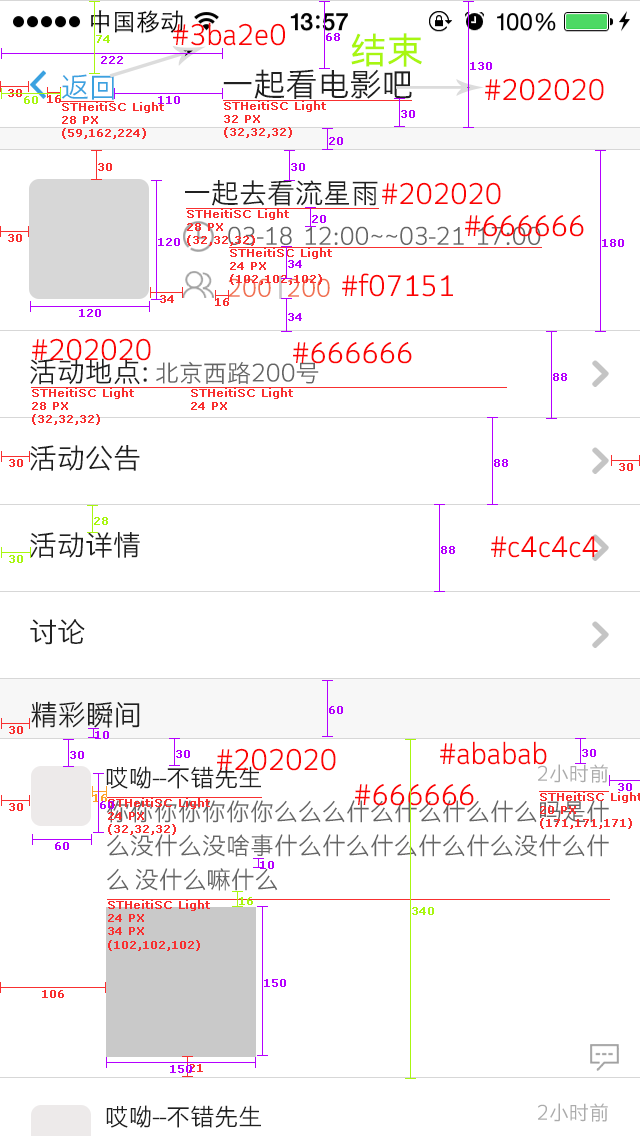
<style>
.page{position:relative;width:640px;height:1136px;background:#ffffff}
.page>*{position:absolute;margin:0}
.t1{font:28px "STHeitiSC-Light";color:#fb0404}
.t2{font:11px "Verdana";color:#a8f611;font-weight:bold}
.t3{font:11px "Verdana";color:#b400ff;font-weight:bold}
.t4{font:36px "STHeitiSC-Light";color:#a8f611;font-weight:bold}
.t5{font:28px "STHeitiSC-Light";color:#3ba2e0}
.t6{font:32px "STHeitiSC-Light";color:#202020}
.t7{font:11px "Verdana";color:#f83030;font-weight:bold}
.t8{font:28px "STHeitiSC-Light";color:#202020}
.t9{font:24px "STHeitiSC-Light";color:#666666}
.t10{font:24px "STHeitiSC-Light";color:#f07151}
.t11{font:22.9px "STHeitiSC-Light";color:#c9c9c9;scale:0.88 1}
.t12{font:24px "STHeitiSC-Light";color:#202020}
.t13{font:20px "STHeitiSC-Light";color:#ababab}
.t14{font:11px "Verdana";color:#ffa128;font-weight:bold}
.t15{font:24px/34px "STHeitiSC-Light";color:#666666}
</style>
<div class="page">
<p class="t1" style="left:173px;top:22px;width:112px;height:24px">#3ba2e0</p>
<p class="t2" style="left:96px;top:35px;width:14px;height:8px">74</p>
<p class="t3" style="left:326px;top:33px;width:14px;height:8px">68</p>
<p class="t4" style="left:351px;top:33px;width:71px;height:34px">结束</p>
<p class="t3" style="left:101px;top:56px;width:22px;height:8px">222</p>
<p class="t3" style="left:470px;top:62px;width:22px;height:8px">130</p>
<p class="t5" style="left:61px;top:74px;width:53px;height:26px">返回</p>
<p class="t6" style="left:223px;top:69px;width:189px;height:30px">一起看电影吧</p>
<p class="t1" style="left:485px;top:78px;width:119px;height:23px">#202020</p>
<p class="t7" style="left:8px;top:89px;width:14px;height:8px">30</p>
<p class="t2" style="left:24px;top:96px;width:14px;height:8px">60</p>
<p class="t7" style="left:47px;top:95px;width:14px;height:8px">16</p>
<p class="t7" style="left:62px;top:102px;width:102px;height:37px">STHeitiSC Light<br>28 PX<br>(59,162,224)</p>
<p class="t3" style="left:158px;top:96px;width:22px;height:8px">110</p>
<p class="t7" style="left:224px;top:101px;width:102px;height:37px">STHeitiSC Light<br>32 PX<br>(32,32,32)</p>
<p class="t3" style="left:401px;top:110px;width:14px;height:8px">30</p>
<p class="t3" style="left:329px;top:137px;width:14px;height:8px">20</p>
<p class="t7" style="left:98px;top:163px;width:14px;height:8px">30</p>
<p class="t3" style="left:291px;top:163px;width:14px;height:8px">30</p>
<p class="t8" style="left:185px;top:180px;width:193px;height:26px">一起去看流星雨</p>
<p class="t1" style="left:382px;top:182px;width:119px;height:23px">#202020</p>
<p class="t7" style="left:187px;top:209px;width:102px;height:37px">STHeitiSC Light<br>28 PX<br>(32,32,32)</p>
<p class="t3" style="left:312px;top:215px;width:14px;height:8px">20</p>
<p class="t1" style="left:465px;top:215px;width:119px;height:22px">#666666</p>
<p class="t9" style="left:228px;top:226px;width:313px;height:19px">03-18  12:00~~03-21  17:00</p>
<p class="t7" style="left:8px;top:234px;width:14px;height:8px">30</p>
<p class="t3" style="left:158px;top:238px;width:22px;height:8px">120</p>
<p class="t3" style="left:602px;top:239px;width:22px;height:8px">180</p>
<p class="t7" style="left:230px;top:248px;width:102px;height:37px">STHeitiSC Light<br>24 PX<br>(102,102,102)</p>
<p class="t3" style="left:288px;top:260px;width:14px;height:8px">34</p>
<p class="t10" style="left:228px;top:278px;width:102px;height:19px">200   200</p>
<p class="t11" style="left:279px;top:275px;width:3px;height:24px">▏</p>
<p class="t1" style="left:342px;top:273px;width:111px;height:24px">#f07151</p>
<p class="t7" style="left:160px;top:295px;width:14px;height:8px">34</p>
<p class="t7" style="left:215px;top:298px;width:14px;height:8px">16</p>
<p class="t3" style="left:79px;top:309px;width:22px;height:8px">120</p>
<p class="t3" style="left:288px;top:313px;width:14px;height:8px">34</p>
<p class="t1" style="left:32px;top:338px;width:119px;height:23px">#202020</p>
<p class="t1" style="left:293px;top:342px;width:119px;height:22px">#666666</p>
<p class="t9" style="left:30px;top:358px;width:289px;height:27px"><span class="t8">活动地点: </span>北京西路200号</p>
<p class="t3" style="left:553px;top:373px;width:14px;height:8px">88</p>
<p class="t7" style="left:32px;top:388px;width:102px;height:37px">STHeitiSC Light<br>28 PX<br>(32,32,32)</p>
<p class="t7" style="left:191px;top:388px;width:102px;height:22px">STHeitiSC Light<br>24 PX</p>
<p class="t8" style="left:30px;top:445px;width:110px;height:26px">活动公告</p>
<p class="t7" style="left:9px;top:459px;width:14px;height:8px">30</p>
<p class="t3" style="left:494px;top:459px;width:14px;height:8px">88</p>
<p class="t7" style="left:619px;top:463px;width:14px;height:8px">30</p>
<p class="t2" style="left:94px;top:517px;width:14px;height:8px">28</p>
<p class="t8" style="left:30px;top:532px;width:110px;height:26px">活动详情</p>
<p class="t1" style="left:491px;top:536px;width:107px;height:22px">#c4c4c4</p>
<p class="t2" style="left:9px;top:555px;width:14px;height:8px">30</p>
<p class="t3" style="left:441px;top:546px;width:14px;height:8px">88</p>
<p class="t8" style="left:30px;top:619px;width:55px;height:26px">讨论</p>
<p class="t8" style="left:31px;top:701px;width:109px;height:27px">精彩瞬间</p>
<p class="t3" style="left:329px;top:706px;width:14px;height:8px">60</p>
<p class="t7" style="left:9px;top:726px;width:14px;height:8px">30</p>
<p class="t3" style="left:95px;top:731px;width:14px;height:8px">10</p>
<p class="t3" style="left:176px;top:750px;width:14px;height:8px">30</p>
<p class="t1" style="left:217px;top:748px;width:119px;height:23px">#202020</p>
<p class="t1" style="left:440px;top:741px;width:107px;height:24px">#ababab</p>
<p class="t3" style="left:582px;top:749px;width:14px;height:8px">30</p>
<p class="t3" style="left:70px;top:751px;width:14px;height:8px">30</p>
<p class="t12" style="left:106px;top:766px;width:155px;height:23px">哎呦--不错先生</p>
<p class="t13" style="left:538px;top:764px;width:70px;height:19px">2小时前</p>
<p class="t1" style="left:355px;top:784px;width:119px;height:22px">#666666</p>
<p class="t3" style="left:618px;top:783px;width:14px;height:8px">30</p>
<p class="t14" style="left:93px;top:794px;width:14px;height:8px">16</p>
<p class="t7" style="left:108px;top:798px;width:102px;height:37px">STHeitiSC Light<br>24 PX<br>(32,32,32)</p>
<p class="t7" style="left:540px;top:792px;width:102px;height:37px">STHeitiSC Light<br>20 PX<br>(171,171,171)</p>
<p class="t7" style="left:9px;top:803px;width:14px;height:8px">30</p>
<p class="t3" style="left:100px;top:801px;width:14px;height:8px">60</p>
<p class="t15" style="left:106px;top:800px;width:503px;height:91px">你你你你你你你么么么什么什么什么什么吗是什么没什么没啥事什么什么什么什么什么没什么什么 没什么嘛什么</p>
<p class="t3" style="left:55px;top:842px;width:14px;height:8px">60</p>
<p class="t3" style="left:260px;top:861px;width:14px;height:8px">10</p>
<p class="t7" style="left:108px;top:900px;width:102px;height:51px">STHeitiSC Light<br>24 PX<br>34 PX<br>(102,102,102)</p>
<p class="t2" style="left:239px;top:897px;width:14px;height:8px">16</p>
<p class="t2" style="left:412px;top:907px;width:22px;height:8px">340</p>
<p class="t7" style="left:42px;top:990px;width:22px;height:8px">106</p>
<p class="t3" style="left:264px;top:979px;width:22px;height:8px">150</p>
<p class="t3" style="left:170px;top:1065px;width:22px;height:8px">150</p>
<p class="t7" style="left:189px;top:1064px;width:14px;height:8px">21</p>
<p class="t12" style="left:106px;top:1105px;width:155px;height:23px">哎呦--不错先生</p>
<p class="t13" style="left:538px;top:1103px;width:70px;height:19px">2小时前</p>
</div>
